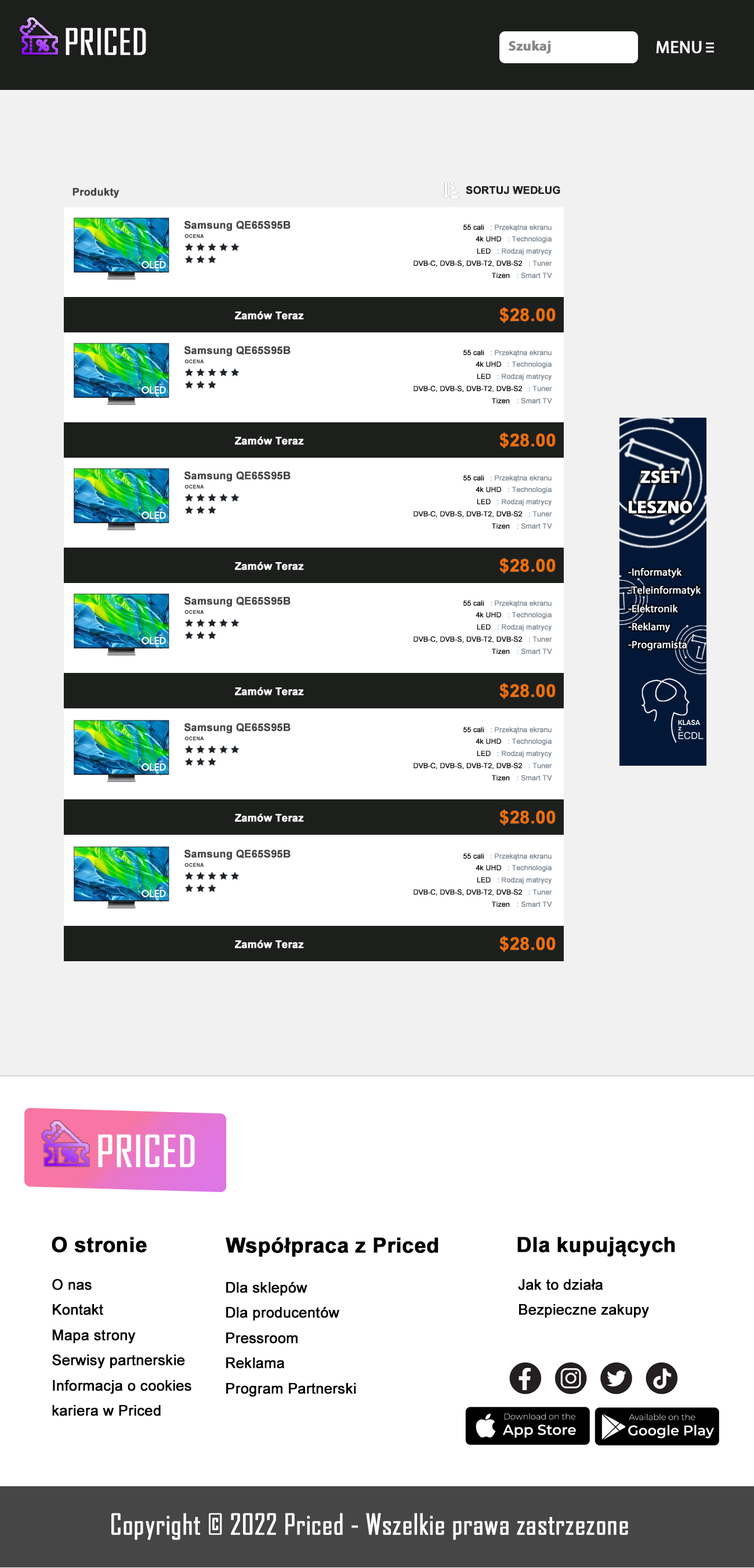
<style>
.page{position:relative;width:754px;height:1568px;background:#ffffff}
.page>*{position:absolute;margin:0}
.t1{font:34.7px "AgencyFB-Reg";color:#ffffff;font-weight:bold}
.t2{font:13.9px "MyriadPro-Bold";color:#888888;font-weight:bold}
.t3{font:17.3px "MyriadPro-Regular";color:#ffffff;font-weight:bold}
.t4{font:14px "MyriadPro-Bold";color:#ffffff;font-weight:bold;scale:1.93 1}
.t5{font:10.4px "Arial-BoldMT";color:#1d1f1d;font-weight:bold}
.t6{font:10.4px "Arial-BoldMT";color:#454545;font-weight:bold}
.t7{font:5.1px "Arial-BoldMT";color:#454545;font-weight:bold}
.t8{font:7px "ArialMT";color:#000000;font-weight:bold}
.t9{font:7px "ArialMT";color:#7c8894;font-weight:bold}
.t10{font:10.4px "Arial-BoldMT";color:#ffffff;font-weight:bold}
.t11{font:17.3px "MyriadPro-Bold";color:#ffffff;font-weight:bold}
.t12{font:10.4px "MyriadPro-Regular";color:#ffffff;font-weight:bold}
.t13{font:41.9px "AgencyFB-Reg";color:#ffffff;font-weight:bold}
.t14{font:20.8px "Arial-BoldMT";color:#000000;font-weight:bold}
.t15{font:14.4px "ArialMT";color:#000000;font-weight:bold}
.t16{font:27.7px "AgencyFB-Reg";color:#ffffff;font-weight:bold}
</style>
<div class="page">
<p class="t1" style="left:66px;top:28px;width:80px;height:27px">PRICED</p>
<p class="t2" style="left:509px;top:41px;width:42px;height:13px">Szukaj</p>
<p class="t3" style="left:656px;top:41px;width:46px;height:12px">MENU</p>
<p class="t4" style="left:706px;top:42px;width:8px;height:3px">-</p>
<p class="t4" style="left:706px;top:46px;width:8px;height:3px">-</p>
<p class="t4" style="left:706px;top:50px;width:8px;height:3px">-</p>
<p class="t5" style="left:466px;top:186px;width:94px;height:8px">SORTUJ WEDŁUG</p>
<p class="t6" style="left:73px;top:188px;width:46px;height:10px">Produkty</p>
<p class="t6" style="left:184px;top:220px;width:107px;height:11px">Samsung QE65S95B</p>
<p class="t7" style="left:184px;top:234px;width:20px;height:4px">OCENA</p>
<p class="t8" style="left:414px;top:224px;width:108px;height:54px;text-align:right">55 cali                   <br>4k UHD           <br>LED                <br>  DVB-C, DVB-S, DVB-T2, DVB-S2 <br>Tizen</p>
<p class="t9" style="left:491px;top:224px;width:61px;height:54px;text-align:right">: Przekątna ekranu<br>: Technologia<br>: Rodzaj matrycy<br>: Tuner<br>: Smart TV</p>
<p class="t10" style="left:235px;top:311px;width:69px;height:9px">Zamów Teraz</p>
<p class="t6" style="left:184px;top:346px;width:107px;height:10px">Samsung QE65S95B</p>
<p class="t8" style="left:414px;top:350px;width:108px;height:54px;text-align:right">55 cali                   <br>4k UHD           <br>LED                <br>  DVB-C, DVB-S, DVB-T2, DVB-S2 <br>Tizen</p>
<p class="t9" style="left:491px;top:350px;width:61px;height:54px;text-align:right">: Przekątna ekranu<br>: Technologia<br>: Rodzaj matrycy<br>: Tuner<br>: Smart TV</p>
<p class="t7" style="left:184px;top:359px;width:20px;height:5px">OCENA</p>
<p class="t10" style="left:235px;top:436px;width:69px;height:9px">Zamów Teraz</p>
<p class="t6" style="left:184px;top:471px;width:107px;height:10px">Samsung QE65S95B</p>
<p class="t11" style="left:629px;top:470px;width:63px;height:43px;text-align:center">ZSET<br>LESZNO</p>
<p class="t7" style="left:184px;top:484px;width:20px;height:5px">OCENA</p>
<p class="t8" style="left:414px;top:475px;width:108px;height:54px;text-align:right">55 cali                   <br>4k UHD           <br>LED                <br>  DVB-C, DVB-S, DVB-T2, DVB-S2 <br>Tizen</p>
<p class="t9" style="left:491px;top:475px;width:61px;height:54px;text-align:right">: Przekątna ekranu<br>: Technologia<br>: Rodzaj matrycy<br>: Tuner<br>: Smart TV</p>
<p class="t10" style="left:235px;top:562px;width:69px;height:8px">Zamów Teraz</p>
<p class="t12" style="left:628px;top:568px;width:73px;height:82px">-Informatyk<br>-Teleinformatyk<br>-Elektronik<br>-Reklamy<br>-Programista</p>
<p class="t6" style="left:184px;top:596px;width:107px;height:11px">Samsung QE65S95B</p>
<p class="t8" style="left:414px;top:600px;width:108px;height:54px;text-align:right">55 cali                   <br>4k UHD           <br>LED                <br>  DVB-C, DVB-S, DVB-T2, DVB-S2 <br>Tizen</p>
<p class="t9" style="left:491px;top:600px;width:61px;height:54px;text-align:right">: Przekątna ekranu<br>: Technologia<br>: Rodzaj matrycy<br>: Tuner<br>: Smart TV</p>
<p class="t7" style="left:184px;top:610px;width:20px;height:4px">OCENA</p>
<p class="t10" style="left:235px;top:687px;width:69px;height:9px">Zamów Teraz</p>
<p class="t6" style="left:184px;top:723px;width:107px;height:10px">Samsung QE65S95B</p>
<p class="t7" style="left:184px;top:736px;width:20px;height:5px">OCENA</p>
<p class="t8" style="left:414px;top:727px;width:108px;height:54px;text-align:right">55 cali                   <br>4k UHD           <br>LED                <br>  DVB-C, DVB-S, DVB-T2, DVB-S2 <br>Tizen</p>
<p class="t9" style="left:491px;top:727px;width:61px;height:54px;text-align:right">: Przekątna ekranu<br>: Technologia<br>: Rodzaj matrycy<br>: Tuner<br>: Smart TV</p>
<p class="t10" style="left:235px;top:813px;width:69px;height:9px">Zamów Teraz</p>
<p class="t6" style="left:184px;top:849px;width:107px;height:11px">Samsung QE65S95B</p>
<p class="t8" style="left:414px;top:853px;width:108px;height:54px;text-align:right">55 cali                   <br>4k UHD           <br>LED                <br>  DVB-C, DVB-S, DVB-T2, DVB-S2 <br>Tizen</p>
<p class="t9" style="left:491px;top:853px;width:61px;height:54px;text-align:right">: Przekątna ekranu<br>: Technologia<br>: Rodzaj matrycy<br>: Tuner<br>: Smart TV</p>
<p class="t7" style="left:184px;top:863px;width:20px;height:4px">OCENA</p>
<p class="t10" style="left:235px;top:940px;width:69px;height:8px">Zamów Teraz</p>
<p class="t13" style="left:98px;top:1134px;width:97px;height:33px">PRICED</p>
<p class="t14" style="left:52px;top:1236px;width:95px;height:16px">O stronie</p>
<p class="t14" style="left:226px;top:1237px;width:213px;height:20px">Współpraca z Priced</p>
<p class="t14" style="left:517px;top:1237px;width:158px;height:19px">Dla kupujących</p>
<p class="t15" style="left:52px;top:1279px;width:139px;height:137px">O nas<br>Kontakt<br>Mapa strony<br>Serwisy partnerskie<br>Informacja o cookies<br>kariera w Priced</p>
<p class="t15" style="left:226px;top:1282px;width:130px;height:115px">Dla sklepów<br>Dla producentów<br>Pressroom<br>Reklama<br>Program Partnerski</p>
<p class="t15" style="left:518px;top:1279px;width:131px;height:39px">Jak to działa<br>Bezpieczne zakupy</p>
<p class="t16" style="left:111px;top:1513px;width:517px;height:27px">Copyright © 2022 Priced - Wszelkie prawa zastrzezone</p>
</div>
